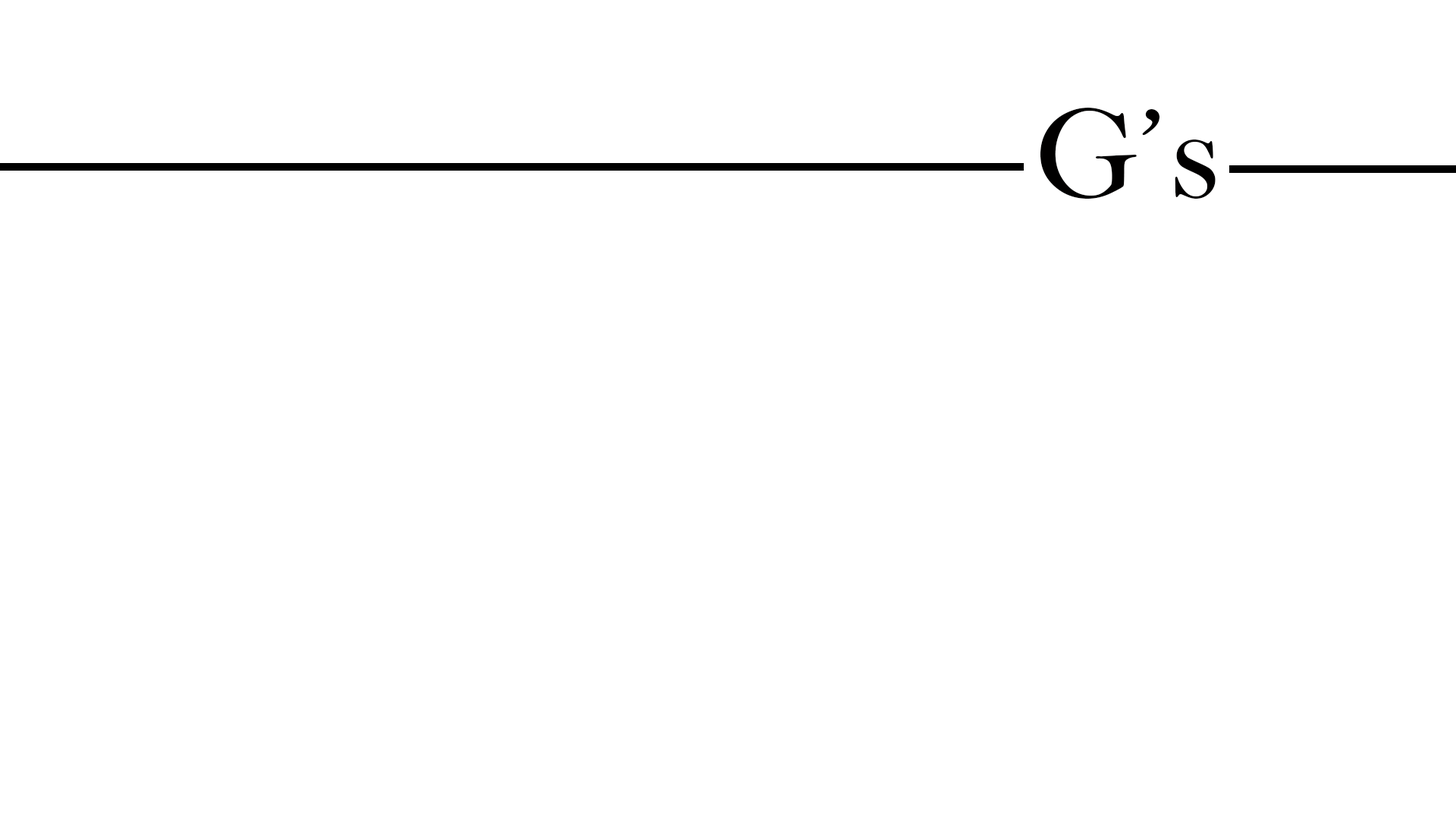
<style>
.page{position:relative;width:1456px;height:819px;background:#ffffff}
.page>*{position:absolute;margin:0}
.t1{font:136.5px "BellMT";color:#010000}
</style>
<div class="page">
<p class="t1" style="left:1040px;top:108px;width:176px;height:91px">G’s</p>
</div>
